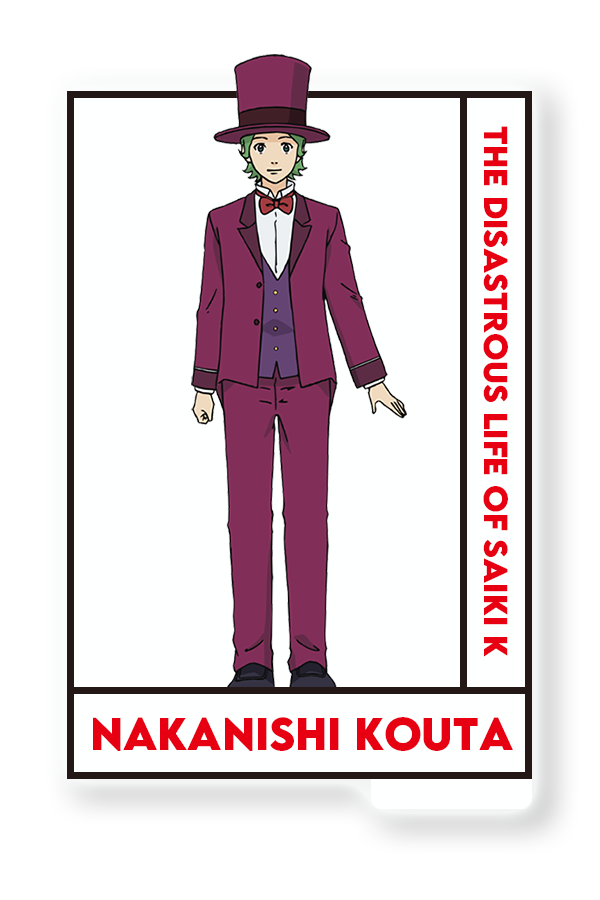
<style>
.page{position:relative;width:600px;height:900px;background:#feffff}
.page>*{position:absolute;margin:0}
.t1{font:29.6px "LEMONMILK-Bold";color:#e70012}
.t2{font:40.6px "LEMONMILK-Bold";color:#e70012}
</style>
<div class="page">
<p class="t1" style="left:483px;top:126px;width:25px;height:531px;rotate:90deg">THE disastrous Life of saiki K</p>
<p class="t2" style="left:93px;top:717px;width:420px;height:34px">Nakanishi Kouta</p>
</div>
